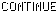
<style>
.page{position:relative;width:56px;height:12px;background:#ffffff}
.page>*{position:absolute;margin:0}
.t1{font:12px "Geneva";color:#ffffff}
.t2{font:12px "Geneva";color:#000000}
</style>
<div class="page">
<p class="t1" style="left:1px;top:1px;width:54px;height:9px">CONTINUE</p>
<p class="t2" style="left:2px;top:2px;width:54px;height:9px">CONTINUE</p>
</div>
